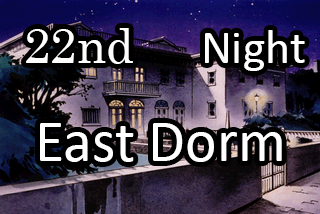
<style>
.page{position:relative;width:320px;height:214px;background:#000000}
.page>*{position:absolute;margin:0}
.t1{font:48px "Century";color:#ffffff}
.t2{font:48px "Calibri";color:#ffffff}
.t3{font:60px "Calibri";color:#ffffff}
</style>
<div class="page">
<p class="t1" style="left:26px;top:28px;width:107px;height:36px">22nd</p>
<p class="t2" style="left:205px;top:30px;width:100px;height:41px">Night</p>
<p class="t3" style="left:40px;top:123px;width:242px;height:39px">East Dorm</p>
</div>
